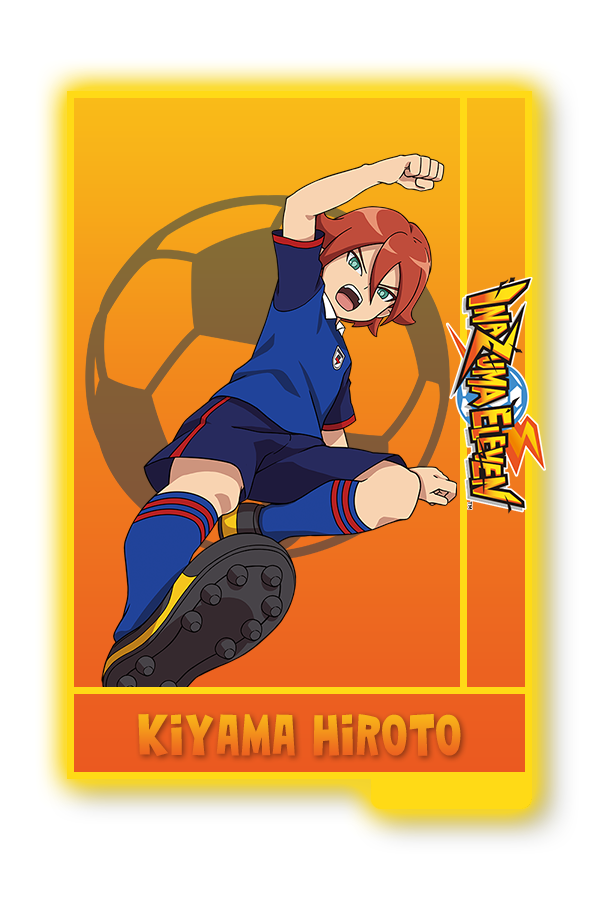
<style>
.page{position:relative;width:600px;height:900px;background:#ffffff}
.page>*{position:absolute;margin:0}
.t1{font:60.3px "TTG-Bold"}
</style>
<div class="page">
<p class="t1" style="left:138px;top:714px;width:323px;height:43px">Kiyama Hiroto</p>
</div>
